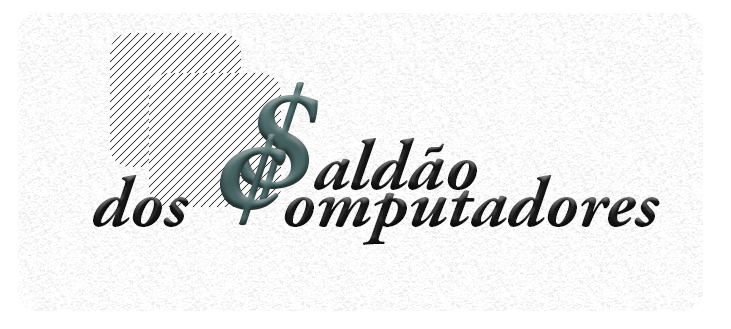
<style>
.page{position:relative;width:731px;height:329px;background:#ffffff}
.page>*{position:absolute;margin:0}
.t1{font:72px "AGaramondPro-BoldItalic"}
.t2{font:150px "AGaramondPro-BoldItalic"}
</style>
<div class="page">
<p class="t1" style="left:240px;top:81px;width:237px;height:123px"><span class="t2">$</span>aldão</p>
<p class="t1" style="left:93px;top:133px;width:567px;height:112px">dos <span class="t2">¢</span>omputadores</p>
</div>
